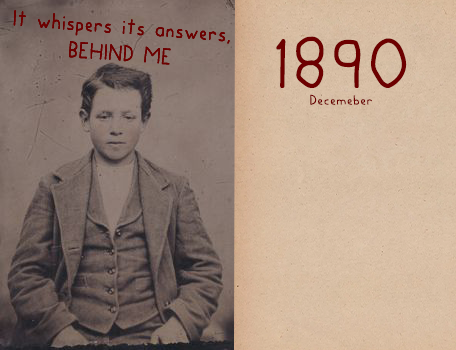
<style>
.page{position:relative;width:456px;height:350px}
.page>*{position:absolute;margin:0}
.t1{font:22.7px "DazHandwritingRegular";letter-spacing:0.05em;color:#6d0000;scale:0.9 1}
.t2{font:14px "DazHandwritingRegular";letter-spacing:0.05em;color:#6d0000}
.t3{font:72px "DazHandwritingRegular";letter-spacing:0.05em;color:#6d0000}
</style>
<div class="page">
<p class="t1" style="left:13px;top:10px;width:217px;height:55px;rotate:4deg">It whispers its answers, BEHIND ME</p>
<p class="t1" style="left:13px;top:10px;width:217px;height:55px;rotate:4deg">It whispers its answers, BEHIND ME</p>
<p class="t1" style="left:13px;top:10px;width:217px;height:55px;rotate:4deg">It whispers its answers, BEHIND ME</p>
<p class="t2" style="left:276px;top:36px;width:131px;height:69px;text-align:center"><span class="t3">1890<br></span>Decemeber</p>
</div>
